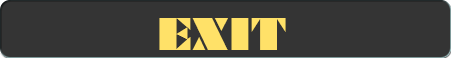
<style>
.page{position:relative;width:451px;height:58px;background:#343434}
.page>*{position:absolute;margin:0}
.t1{font:72.4px "Braggadocio";letter-spacing:0.01em;color:#ffe168;scale:0.9 1}
</style>
<div class="page">
<p class="t1" style="left:159px;top:18px;width:127px;height:32px">EXIT</p>
</div>
